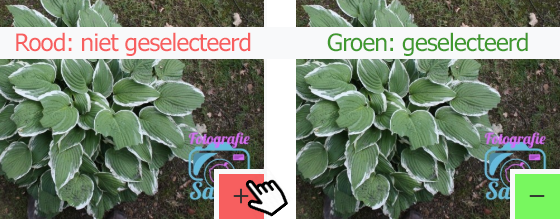
<style>
.page{position:relative;width:560px;height:219px}
.page>*{position:absolute;margin:0}
.t1{font:24px "Tahoma";letter-spacing:-0.025em;color:#f75f5f}
.t2{font:24px "Tahoma";letter-spacing:-0.025em;color:#40982f}
</style>
<div class="page">
<p class="t1" style="left:16px;top:32px;width:235px;height:24px">Rood: niet geselecteerd</p>
<p class="t2" style="left:327px;top:32px;width:201px;height:24px">Groen: geselecteerd</p>
</div>
